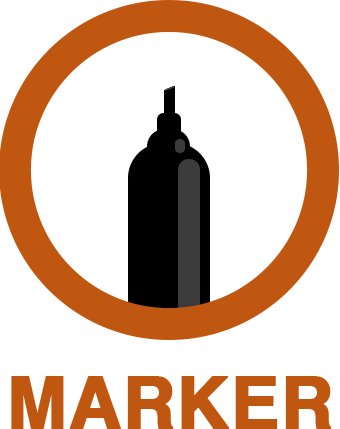
<style>
.page{position:relative;width:340px;height:429px;background:#ffffff}
.page>*{position:absolute;margin:0}
.t1{font:72px "Helvetica-Bold";color:#bf5711;font-weight:bold}
</style>
<div class="page">
<p class="t1" style="left:11px;top:376px;width:321px;height:53px">MARKER</p>
</div>
